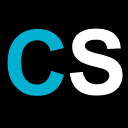
<style>
.page{position:relative;width:128px;height:128px;background:#000000}
.page>*{position:absolute;margin:0}
.t1{font:90px "Arial-BoldMT";color:#00b0d0}
.t2{font:90px "Arial-BoldMT";color:#ffffff}
</style>
<div class="page">
<p class="t1" style="left:7px;top:29px;width:57px;height:67px">C</p>
<p class="t2" style="left:69px;top:28px;width:54px;height:68px">S</p>
</div>
